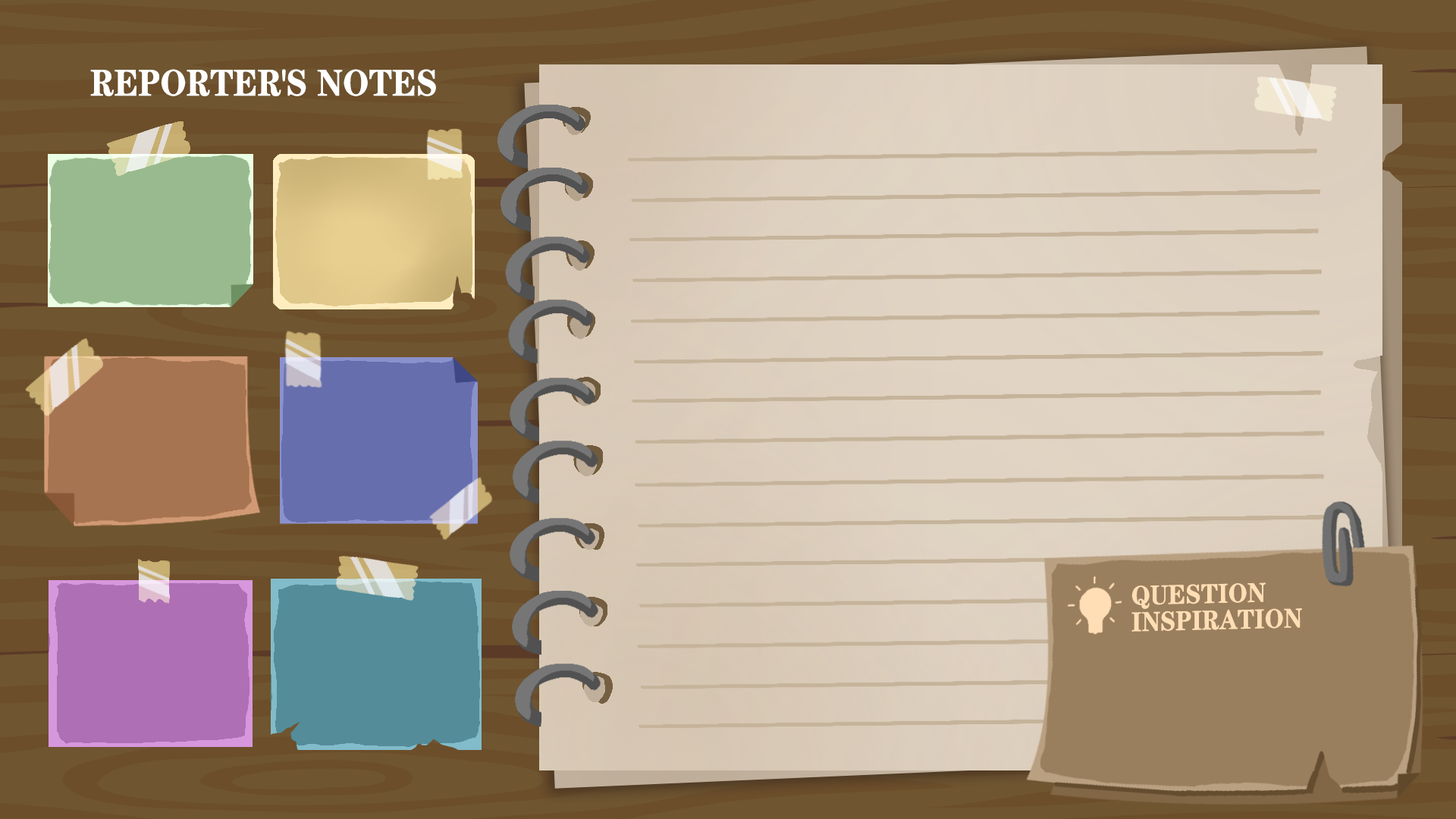
<style>
.page{position:relative;width:1456px;height:819px}
.page>*{position:absolute;margin:0}
.t1{font:37.5px "FZCHSJW--GB1-0";color:#ffffff;text-transform:uppercase;scale:0.9 1}
.t2{font:27.4px/26.4px "FZCHSJW--GB1-0";color:#ffdeb5;text-transform:uppercase;scale:0.9 1}
</style>
<div class="page">
<p class="t1" style="left:90px;top:69px;width:346px;height:27px">Reporter's Notes</p>
<p class="t2" style="left:1131px;top:582px;width:171px;height:50px;rotate:-1deg">Question <br>Inspiration</p>
</div>
